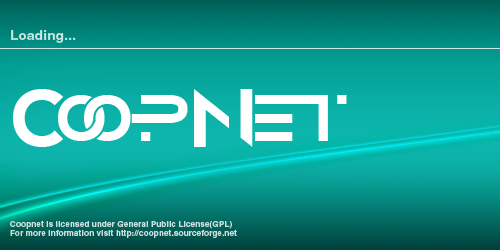
<style>
.page{position:relative;width:500px;height:250px}
.page>*{position:absolute;margin:0}
.t1{font:13.3px "HelveticaCyr-Bold";letter-spacing:0.025em;color:#cce7e5}
.t2{font:8px "HelveticaCyr-Bold";letter-spacing:0.025em;color:#ccdedd}
</style>
<div class="page">
<p class="t1" style="left:11px;top:30px;width:65px;height:13px">Loading...</p>
<p class="t2" style="left:10px;top:220px;width:227px;height:18px">Coopnet is licensed under General Public License(GPL)<br>For more information visit http://coopnet.sourceforge.net</p>
</div>
